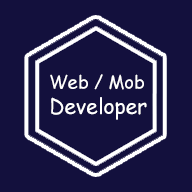
<style>
.page{position:relative;width:192px;height:192px;background:#13103d}
.page>*{position:absolute;margin:0}
.t1{font:18px "ComicSansMS";color:#ffffff}
.t2{font:21px "ComicSansMS";color:#ffffff}
</style>
<div class="page">
<p class="t1" style="left:50px;top:74px;width:97px;height:46px">Web / Mob<br><span class="t2">Developer</span></p>
</div>
